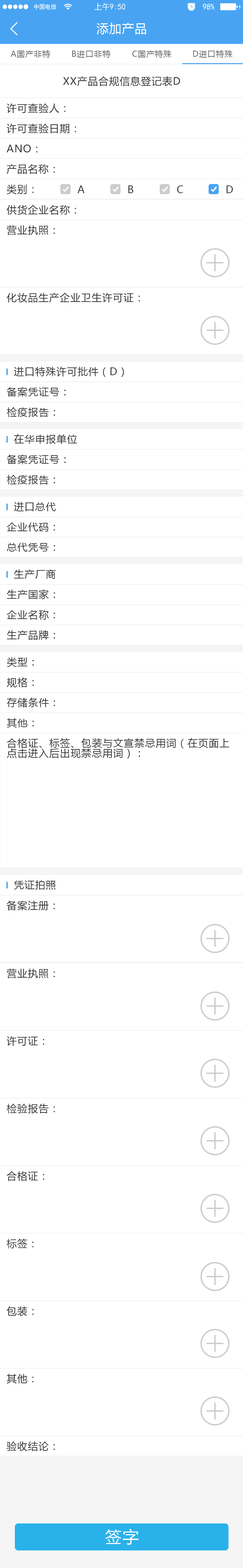
<style>
.page{position:relative;width:243px;height:1568px;background:#ffffff}
.page>*{position:absolute;margin:0}
.t1{font:12.2px "MicrosoftYaHei";letter-spacing:0.05em;color:#ffffff}
.t2{font:8.1px "MicrosoftYaHei";letter-spacing:0.05em;color:#666666}
.t3{font:10.1px "MicrosoftYaHei";letter-spacing:0.05em;color:#333333}
.t4{font:10.1px/10.1px "MicrosoftYaHei";letter-spacing:0.05em;color:#333333}
.t5{font:16.2px "MicrosoftYaHei";letter-spacing:0.05em;color:#ffffff}
</style>
<div class="page">
<p class="t1" style="left:97px;top:23px;width:49px;height:11px">添加产品</p>
<p class="t2" style="left:10px;top:50px;width:40px;height:8px">A国产非特</p>
<p class="t2" style="left:72px;top:50px;width:39px;height:8px">B进口非特</p>
<p class="t2" style="left:132px;top:50px;width:40px;height:8px">C国产特殊</p>
<p class="t2" style="left:193px;top:50px;width:40px;height:8px">D进口特殊</p>
<p class="t3" style="left:63px;top:76px;width:117px;height:10px">XX产品合规信息登记表D</p>
<p class="t3" style="left:7px;top:103px;width:59px;height:10px">许可查验人：</p>
<p class="t3" style="left:7px;top:124px;width:69px;height:10px">许可查验日期：</p>
<p class="t3" style="left:7px;top:145px;width:30px;height:8px">ANO：</p>
<p class="t3" style="left:7px;top:164px;width:48px;height:10px">产品名称：</p>
<p class="t3" style="left:7px;top:184px;width:27px;height:11px">类别：</p>
<p class="t3" style="left:77px;top:185px;width:8px;height:8px">A</p>
<p class="t3" style="left:128px;top:185px;width:5px;height:8px">B</p>
<p class="t3" style="left:177px;top:185px;width:6px;height:8px">C</p>
<p class="t3" style="left:227px;top:185px;width:6px;height:8px">D</p>
<p class="t3" style="left:6px;top:205px;width:70px;height:10px">供货企业名称：</p>
<p class="t3" style="left:7px;top:225px;width:48px;height:10px">营业执照：</p>
<p class="t3" style="left:7px;top:293px;width:133px;height:10px">化妆品生产企业卫生许可证：</p>
<p class="t3" style="left:14px;top:366px;width:110px;height:11px">进口特殊许可批件（D）</p>
<p class="t3" style="left:7px;top:387px;width:59px;height:10px">备案凭证号：</p>
<p class="t3" style="left:7px;top:407px;width:48px;height:10px">检疫报告：</p>
<p class="t3" style="left:14px;top:434px;width:63px;height:10px">在华申报单位</p>
<p class="t3" style="left:7px;top:455px;width:59px;height:9px">备案凭证号：</p>
<p class="t3" style="left:7px;top:475px;width:48px;height:10px">检疫报告：</p>
<p class="t3" style="left:14px;top:502px;width:42px;height:9px">进口总代</p>
<p class="t3" style="left:7px;top:522px;width:48px;height:10px">企业代码：</p>
<p class="t3" style="left:7px;top:543px;width:48px;height:9px">总代凭号：</p>
<p class="t3" style="left:14px;top:569px;width:42px;height:10px">生产厂商</p>
<p class="t3" style="left:7px;top:589px;width:48px;height:10px">生产国家：</p>
<p class="t3" style="left:7px;top:610px;width:48px;height:10px">企业名称：</p>
<p class="t3" style="left:7px;top:630px;width:48px;height:10px">生产品牌：</p>
<p class="t3" style="left:7px;top:657px;width:27px;height:10px">类型：</p>
<p class="t3" style="left:7px;top:677px;width:27px;height:11px">规格：</p>
<p class="t3" style="left:7px;top:698px;width:48px;height:10px">存储条件：</p>
<p class="t3" style="left:7px;top:718px;width:27px;height:10px">其他：</p>
<p class="t4" style="left:7px;top:738px;width:223px;height:21px">合格证、标签、包装与文宣禁忌用词（在页面上<br>点击进入后出现禁忌用词）：</p>
<p class="t3" style="left:14px;top:880px;width:42px;height:10px">凭证拍照</p>
<p class="t3" style="left:6px;top:900px;width:49px;height:10px">备案注册：</p>
<p class="t3" style="left:7px;top:969px;width:48px;height:9px">营业执照：</p>
<p class="t3" style="left:7px;top:1036px;width:37px;height:10px">许可证：</p>
<p class="t3" style="left:7px;top:1104px;width:48px;height:9px">检验报告：</p>
<p class="t3" style="left:7px;top:1171px;width:37px;height:10px">合格证：</p>
<p class="t3" style="left:6px;top:1239px;width:28px;height:10px">标签：</p>
<p class="t3" style="left:6px;top:1306px;width:28px;height:10px">包装：</p>
<p class="t3" style="left:7px;top:1374px;width:27px;height:10px">其他：</p>
<p class="t3" style="left:6px;top:1441px;width:49px;height:10px">验收结论：</p>
<p class="t5" style="left:105px;top:1529px;width:34px;height:16px">签字</p>
</div>
